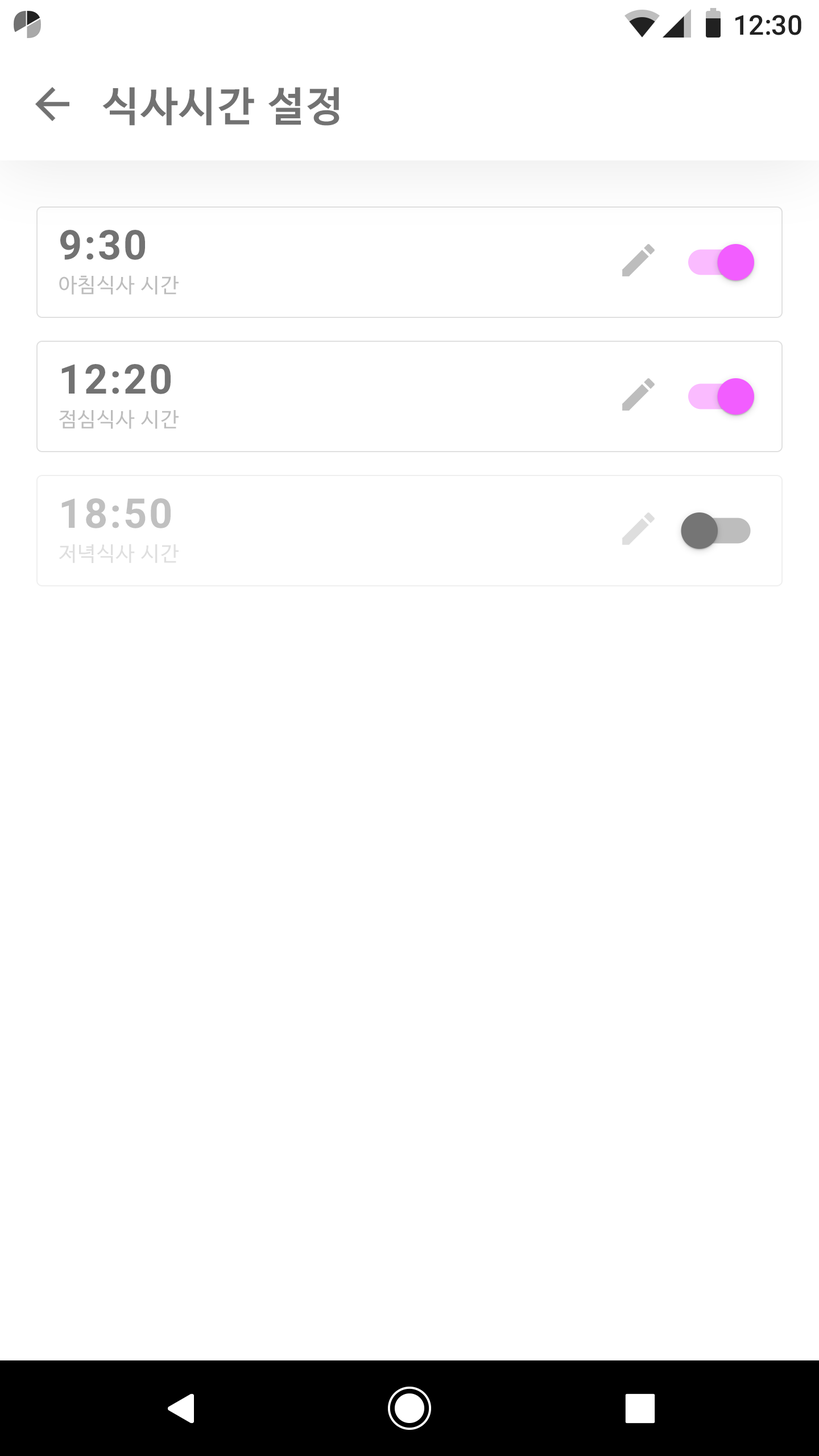
<style>
.page{position:relative;width:819px;height:1456px;background:#ffffff}
.page>*{position:absolute;margin:0}
.t1{font:27.3px "Roboto-Medium";color:#212121}
.t2{font:40.9px "NanumBarunGothicBold";letter-spacing:0.05em;color:#727272}
.t3{font:40.9px "Roboto-Bold";letter-spacing:0.05em;color:#727272}
.t4{font:20.5px "NanumBarunGothic";letter-spacing:0.05em;color:#bdbdbd}
.t5{font:40.9px "Roboto-Bold";letter-spacing:0.05em;color:#c0c0c0}
.t6{font:20.5px "NanumBarunGothic";letter-spacing:0.05em;color:#dfdfdf}
</style>
<div class="page">
<p class="t1" style="left:735px;top:15px;width:66px;height:20px">12:30</p>
<p class="t2" style="left:102px;top:87px;width:238px;height:39px">식사시간 설정</p>
<p class="t3" style="left:60px;top:230px;width:85px;height:30px">9:30</p>
<p class="t4" style="left:59px;top:275px;width:120px;height:20px">아침식사 시간</p>
<p class="t3" style="left:61px;top:364px;width:110px;height:30px">12:20</p>
<p class="t4" style="left:59px;top:409px;width:120px;height:20px">점심식사 시간</p>
<p class="t5" style="left:61px;top:498px;width:110px;height:30px">18:50</p>
<p class="t6" style="left:59px;top:544px;width:120px;height:19px">저녁식사 시간</p>
</div>
